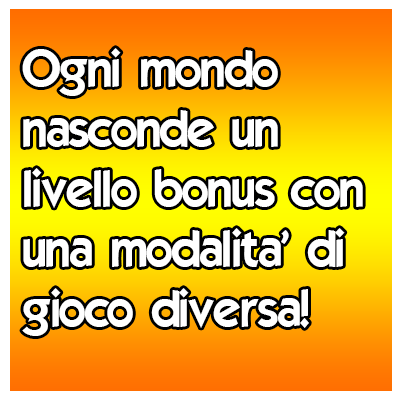
<style>
.page{position:relative;width:400px;height:400px;background:#ffffff}
.page>*{position:absolute;margin:0}
.t1{font:50px "ELEGANCE";color:#ffffff}
</style>
<div class="page">
<p class="t1" style="left:22px;top:48px;width:341px;height:288px">Ogni mondo<br>nasconde un<br>livello bonus con<br>una modalita' di<br>gioco diversa!</p>
</div>
